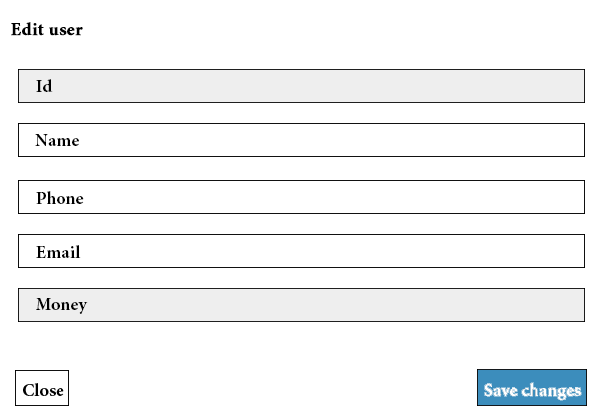
<style>
.page{position:relative;width:600px;height:420px;background:#ffffff}
.page>*{position:absolute;margin:0}
.t1{font:18px "MinionPro-Bold";color:#000000;font-weight:bold}
.t2{font:18px "MinionPro-Bold";color:#000000}
</style>
<div class="page">
<p class="t1" style="left:11px;top:22px;width:72px;height:14px">Edit user</p>
<p class="t2" style="left:36px;top:79px;width:17px;height:13px">Id</p>
<p class="t2" style="left:35px;top:134px;width:44px;height:12px">Name</p>
<p class="t2" style="left:36px;top:191px;width:48px;height:13px">Phone</p>
<p class="t2" style="left:36px;top:245px;width:45px;height:13px">Email</p>
<p class="t2" style="left:36px;top:298px;width:52px;height:16px">Money</p>
</div>
